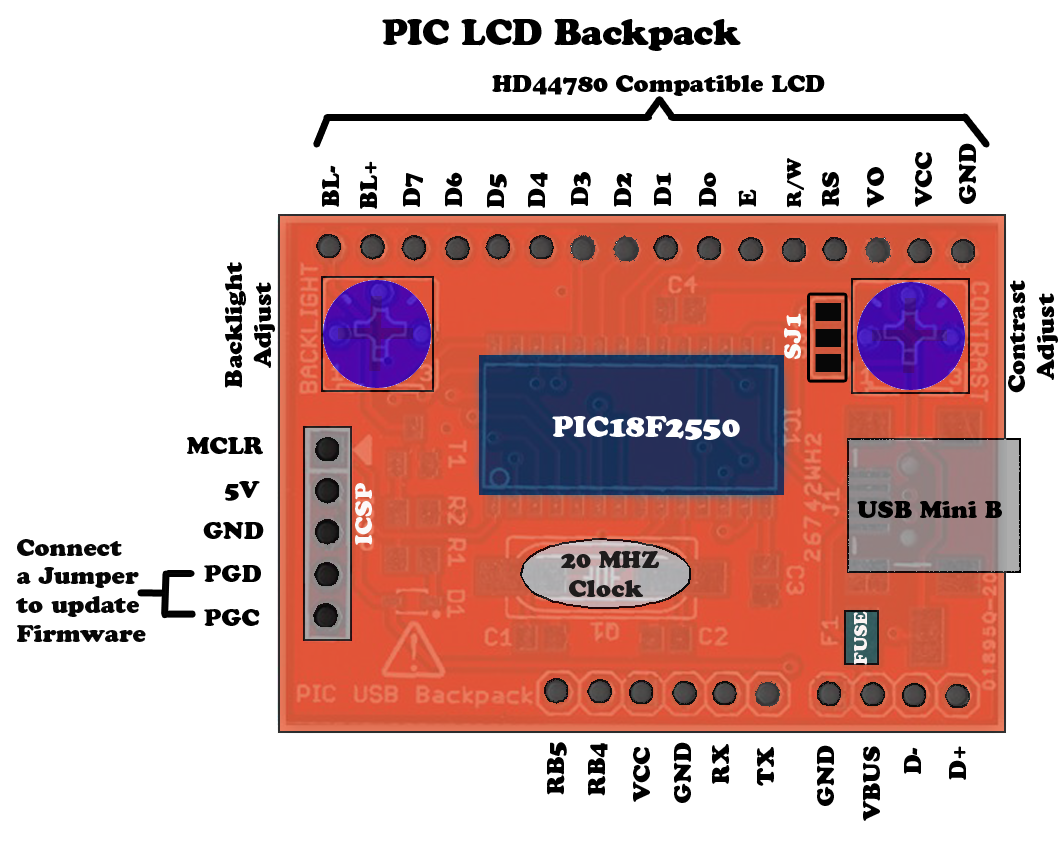
<style>
.page{position:relative;width:1061px;height:843px;background:#ffffff}
.page>*{position:absolute;margin:0}
.t1{font:36px "CooperBlackStd";color:#000000}
.t2{font:24px "CooperBlackStd";color:#000000}
.t3{font:20px "CooperBlackStd";color:#000000}
.t4{font:24px "CooperBlackStd";color:#fbfdfb}
.t5{font:30px "CooperBlackStd";color:#ffffff}
.t6{font:24px "CooperBlackStd";color:#fcf9f9}
.t7{font:24px "CooperBlackStd";color:#070707}
.t8{font:24px "CooperBlackStd";color:#1e1c1c}
.t9{font:18px "CooperBlackStd";color:#fbf4f4}
</style>
<div class="page">
<p class="t1" style="left:382px;top:18px;width:359px;height:33px">PIC LCD Backpack</p>
<p class="t2" style="left:492px;top:75px;width:333px;height:21px">HD44780 Compatible LCD</p>
<p class="t2" style="left:959px;top:143px;width:17px;height:61px;rotate:-90deg">GND</p>
<p class="t2" style="left:360px;top:161px;width:17px;height:48px;rotate:-90deg">BL+</p>
<p class="t3" style="left:787px;top:158px;width:17px;height:50px;rotate:-90deg">R/W</p>
<p class="t2" style="left:915px;top:152px;width:17px;height:55px;rotate:-90deg">VCC</p>
<p class="t2" style="left:322px;top:165px;width:17px;height:42px;rotate:-90deg">BL-</p>
<p class="t2" style="left:403px;top:173px;width:20px;height:34px;rotate:-90deg">D7</p>
<p class="t2" style="left:445px;top:172px;width:17px;height:35px;rotate:-90deg">D6</p>
<p class="t2" style="left:487px;top:174px;width:20px;height:34px;rotate:-90deg">D5</p>
<p class="t2" style="left:528px;top:172px;width:20px;height:36px;rotate:-90deg">D4</p>
<p class="t2" style="left:571px;top:172px;width:20px;height:34px;rotate:-90deg">D3</p>
<p class="t2" style="left:614px;top:173px;width:19px;height:34px;rotate:-90deg">D2</p>
<p class="t2" style="left:654px;top:172px;width:17px;height:34px;rotate:-90deg">D1</p>
<p class="t2" style="left:699px;top:172px;width:17px;height:35px;rotate:-90deg">Do</p>
<p class="t2" style="left:822px;top:172px;width:18px;height:35px;rotate:-90deg">RS</p>
<p class="t2" style="left:867px;top:167px;width:17px;height:41px;rotate:-90deg">VO</p>
<p class="t2" style="left:738px;top:189px;width:18px;height:18px;rotate:-90deg">E</p>
<p class="t2" style="left:225px;top:262px;width:50px;height:126px;text-align:center;rotate:-90deg">Backlight<br>Adjust</p>
<p class="t2" style="left:1008px;top:280px;width:50px;height:113px;text-align:center;rotate:-90deg">Contrast<br>Adjust</p>
<p class="t4" style="left:784px;top:313px;width:17px;height:46px;rotate:-90deg">SJ1</p>
<p class="t5" style="left:552px;top:416px;width:188px;height:24px">PIC18F2550</p>
<p class="t2" style="left:187px;top:437px;width:76px;height:18px">MCLR</p>
<p class="t2" style="left:225px;top:481px;width:35px;height:20px">5V</p>
<p class="t6" style="left:355px;top:483px;width:17px;height:62px;rotate:-90deg">ICSP</p>
<p class="t2" style="left:857px;top:501px;width:145px;height:17px">USB Mini B</p>
<p class="t2" style="left:203px;top:522px;width:61px;height:17px">GND</p>
<p class="t7" style="left:16px;top:539px;width:130px;height:103px">Connect<br>a Jumper <br>to update <br>Firmware</p>
<p class="t8" style="left:561px;top:551px;width:98px;height:46px">20 MHZ<br> Clock</p>
<p class="t2" style="left:204px;top:565px;width:57px;height:17px">PGD</p>
<p class="t2" style="left:204px;top:609px;width:56px;height:17px">PGC</p>
<p class="t9" style="left:853px;top:611px;width:14px;height:54px;rotate:-90deg">FUSE</p>
<p class="t2" style="left:547px;top:742px;width:20px;height:53px;rotate:-90deg">RB5</p>
<p class="t2" style="left:588px;top:743px;width:20px;height:53px;rotate:-90deg">RB4</p>
<p class="t2" style="left:633px;top:747px;width:17px;height:55px;rotate:-90deg">VCC</p>
<p class="t2" style="left:674px;top:742px;width:17px;height:61px;rotate:-90deg">GND</p>
<p class="t2" style="left:712px;top:744px;width:18px;height:40px;rotate:-90deg">RX</p>
<p class="t2" style="left:756px;top:747px;width:18px;height:39px;rotate:-90deg">TX</p>
<p class="t2" style="left:817px;top:745px;width:17px;height:61px;rotate:-90deg">GND</p>
<p class="t2" style="left:863px;top:746px;width:17px;height:75px;rotate:-90deg">VBUS</p>
<p class="t2" style="left:904px;top:747px;width:17px;height:27px;rotate:-90deg">D-</p>
<p class="t2" style="left:949px;top:746px;width:17px;height:34px;rotate:-90deg">D+</p>
</div>
